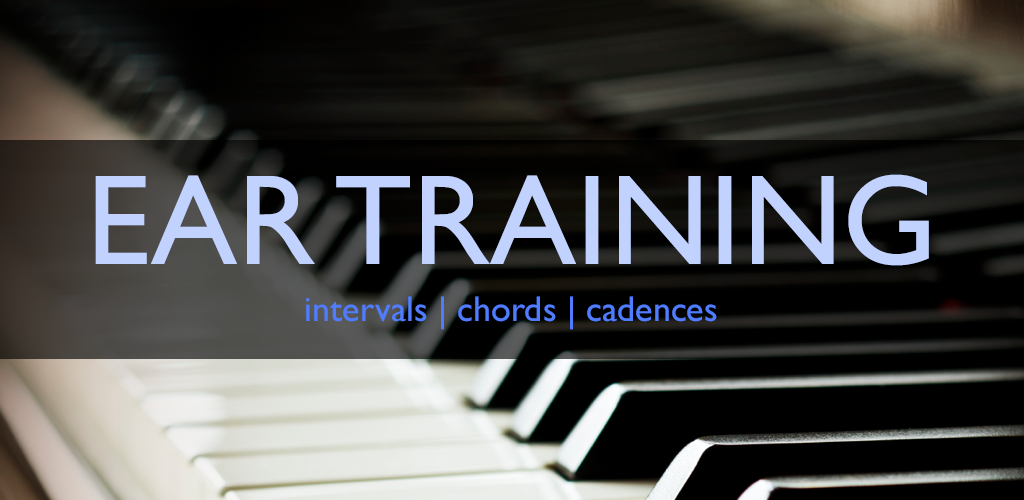
<style>
.page{position:relative;width:1024px;height:500px}
.page>*{position:absolute;margin:0}
.t1{font:129px "GillSansMT";color:#c2d2ff}
.t2{font:36px "GillSansMT";color:#507dff}
</style>
<div class="page">
<p class="t1" style="left:95px;top:174px;width:834px;height:92px">EAR TRAINING</p>
<p class="t2" style="left:306px;top:296px;width:411px;height:34px">intervals | chords | cadences</p>
</div>
